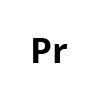
<style>
.page{position:relative;width:100px;height:100px;background:#ffffff}
.page>*{position:absolute;margin:0}
.t1{font:35px "OpenSans-Bold";color:#000000}
</style>
<div class="page">
<p class="t1" style="left:33px;top:38px;width:35px;height:25px">Pr</p>
</div>
